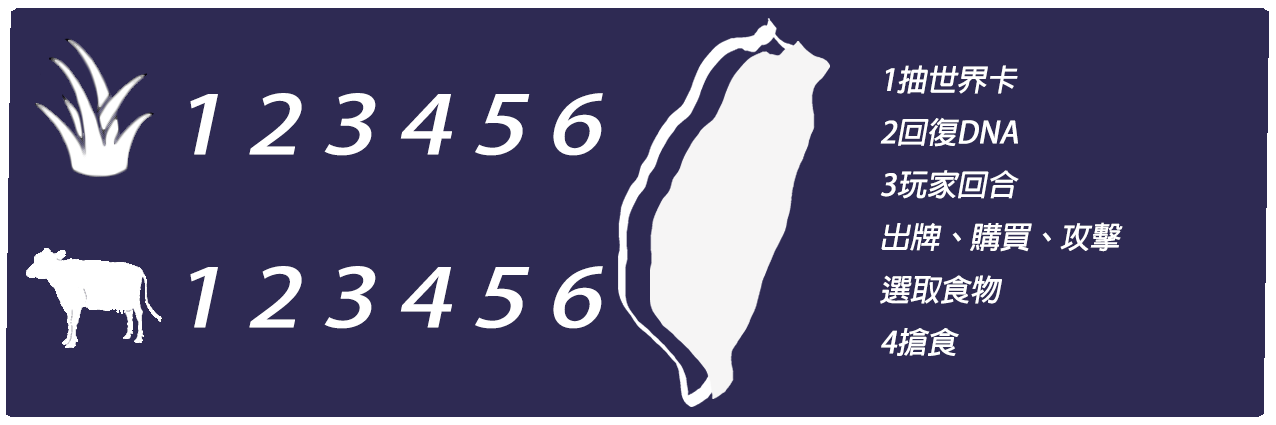
<style>
.page{position:relative;width:1276px;height:425px;background:#2e2a53}
.page>*{position:absolute;margin:0}
.t1{font:30px "AdobeFanHeitiStd-Bold";color:#ffffff;font-style:italic}
.t2{font:80px "AdobeFanHeitiStd-Bold";color:#ffffff;font-style:italic;scale:1.2 1}
</style>
<div class="page">
<p class="t1" style="left:880px;top:65px;width:243px;height:291px">1抽世界卡<br>2回復DNA<br>3玩家回合<br>出牌、購買、攻擊<br>選取食物<br>4搶食</p>
<p class="t2" style="left:190px;top:93px;width:413px;height:63px">1 2 3 4 5 6</p>
<p class="t2" style="left:190px;top:266px;width:413px;height:63px">1 2 3 4 5 6</p>
</div>
